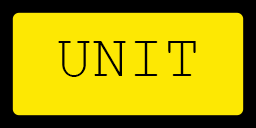
<style>
.page{position:relative;width:256px;height:128px;background:#fde803}
.page>*{position:absolute;margin:0}
.t1{font:60px "CourierNewPSMT";color:#000000}
</style>
<div class="page">
<p class="t1" style="left:58px;top:41px;width:138px;height:36px">UNIT</p>
</div>
